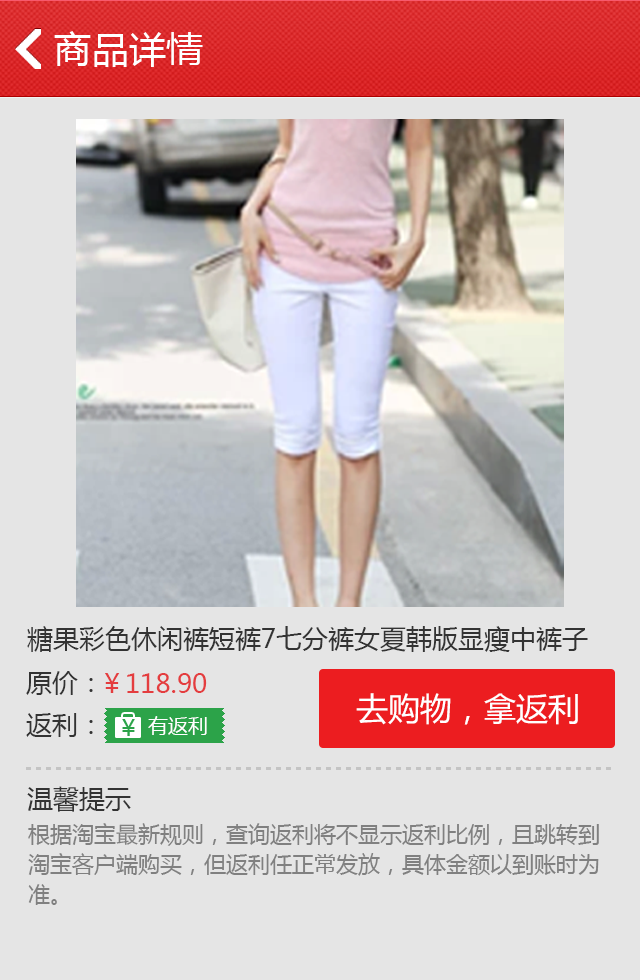
<style>
.page{position:relative;width:640px;height:980px;background:#e5e5e5}
.page>*{position:absolute;margin:0}
.t1{font:37.3px "MicrosoftYaHei";color:#ffffff}
.t2{font:26px "MicrosoftYaHei";color:#333333}
.t3{font:26px "MicrosoftYaHei";color:#e43d3f}
.t4{font:32px "MicrosoftYaHei";color:#ffffff}
.t5{font:20px "MicrosoftYaHei";color:#ffffff}
.t6{font:22px/30px "MicrosoftYaHei";color:#808080}
</style>
<div class="page">
<p class="t1" style="left:54px;top:31px;width:149px;height:36px">商品详情</p>
<p class="t2" style="left:27px;top:626px;width:561px;height:26px">糖果彩色休闲裤短裤7七分裤女夏韩版显瘦中裤子</p>
<p class="t2" style="left:26px;top:671px;width:67px;height:24px">原价：</p>
<p class="t3" style="left:105px;top:673px;width:102px;height:20px">￥118.90</p>
<p class="t4" style="left:356px;top:693px;width:222px;height:32px">去购物，拿返利</p>
<p class="t2" style="left:26px;top:713px;width:67px;height:24px">返利：</p>
<p class="t5" style="left:148px;top:716px;width:59px;height:19px">有返利</p>
<p class="t2" style="left:27px;top:786px;width:104px;height:26px">温馨提示</p>
<p class="t6" style="left:28px;top:823px;width:571px;height:82px">根据淘宝最新规则，查询返利将不显示返利比例，且跳转到淘宝客户端购买，但返利任正常发放，具体金额以到账时为准。</p>
</div>
